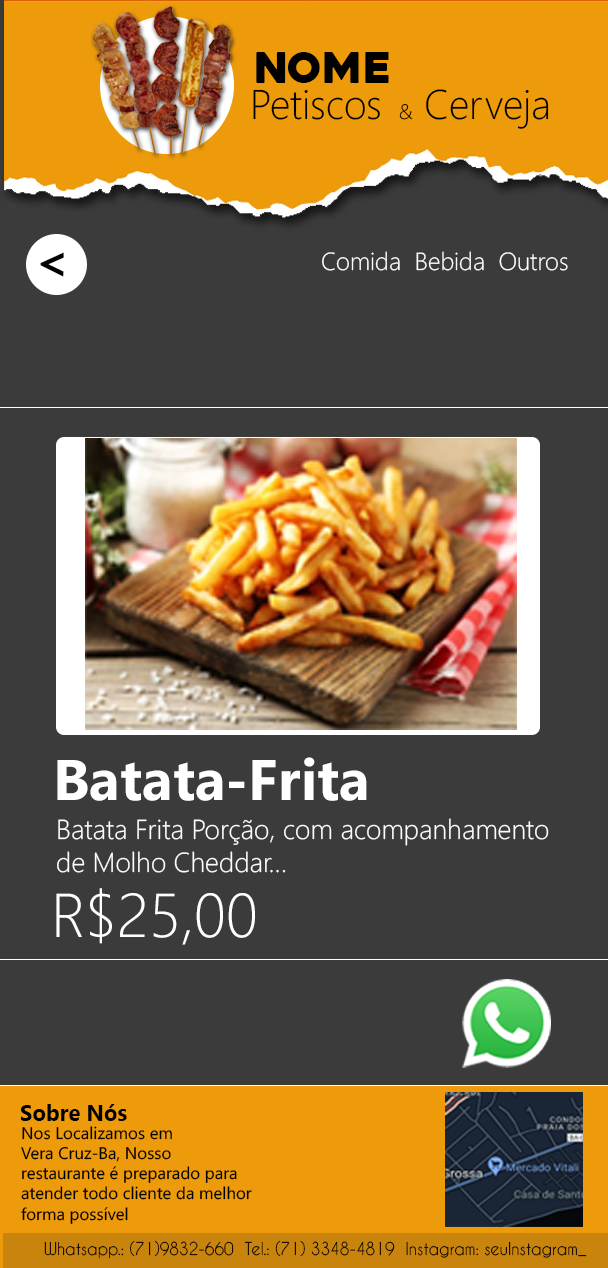
<style>
.page{position:relative;width:608px;height:1268px;background:#3c3b3b}
.page>*{position:absolute;margin:0}
.t1{font:42.8px "Heavitas";color:#000000}
.t2{font:41.5px "SegoeUI-Light";color:#000000;scale:0.97 1}
.t3{font:21px "SegoeUI-Light";color:#000000;scale:0.97 1}
.t4{font:45.7px "CaviarDreams-Bold";color:#000000}
.t5{font:24.9px "SegoeUI-Light";color:#ffffff}
.t6{font:57.2px "SegoeUI-Bold";color:#ffffff}
.t7{font:27.4px "SegoeUI-Light";color:#ffffff}
.t8{font:61.8px "SegoeUI-Light";color:#ffffff}
.t9{font:22.8px "SegoeUI-Bold";color:#000000;scale:0.97 1}
.t10{font:16.7px "SegoeUI";color:#000000}
.t11{font:16.8px "CaviarDreams";color:#000000;scale:0.94 1}
</style>
<div class="page">
<p class="t1" style="left:256px;top:52px;width:133px;height:31px">Nome</p>
<p class="t2" style="left:253px;top:89px;width:296px;height:40px">Petiscos <span class="t3"> &amp;</span> Cerveja</p>
<p class="t4" style="left:40px;top:252px;width:24px;height:25px;rotate:91deg">v</p>
<p class="t5" style="left:322px;top:251px;width:246px;height:20px">Comida  Bebida  Outros</p>
<p class="t6" style="left:57px;top:757px;width:310px;height:44px">Batata-Frita</p>
<p class="t7" style="left:57px;top:818px;width:492px;height:55px">Batata Frita Porção, com acompanhamento <br>de Molho Cheddar...</p>
<p class="t8" style="left:56px;top:888px;width:199px;height:57px">R$25,00</p>
<p class="t9" style="left:21px;top:1104px;width:106px;height:17px">Sobre Nós</p>
<p class="t10" style="left:21px;top:1126px;width:231px;height:98px">Nos Localizamos em<br>Vera Cruz-Ba, Nosso <br>restaurante é preparado para<br>atender todo cliente da melhor <br>forma possível</p>
<p class="t11" style="left:44px;top:1240px;width:543px;height:19px">Whatsapp.: (71)9832-660  Tel.: (71) 3348-4819  Instagram: seuInstagram_</p>
</div>
